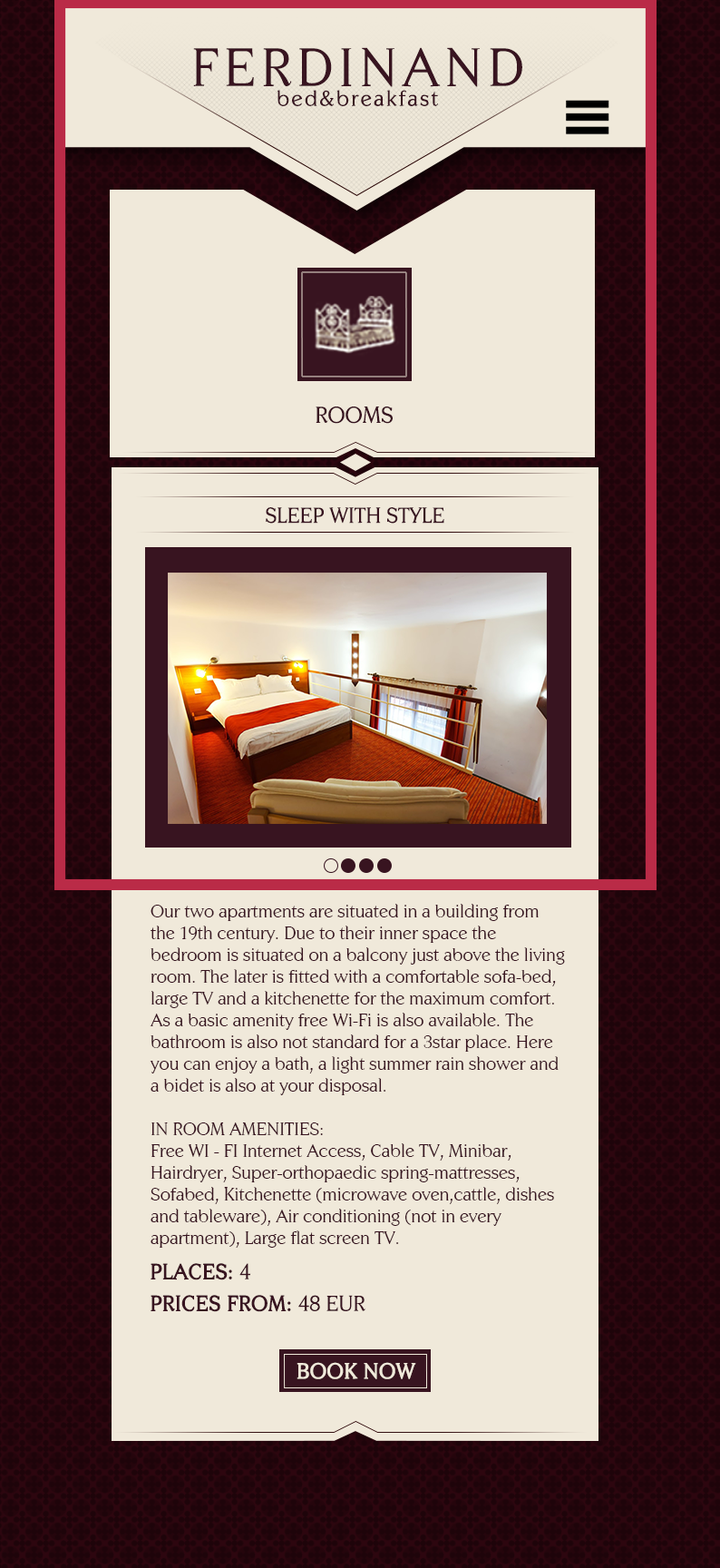
<style>
.page{position:relative;width:720px;height:1568px;background:#f0e9da}
.page>*{position:absolute;margin:0}
.t1{font:54.4px "CentabelBook";letter-spacing:0.1em;color:#381420;text-transform:uppercase}
.t2{font:21.8px "CentabelBook";letter-spacing:0.1em;color:#381420}
.t3{font:23px "CentabelBook";color:#381420;text-transform:uppercase}
.t4{font:21.8px "CentabelBook";color:#381420;text-transform:uppercase}
.t5{font:18.1px "CentabelBook";color:#381420}
.t6{font:21.8px "CentabelBook";color:#381420;text-transform:uppercase;font-weight:bold}
.t7{font:21.8px "CentabelBook";color:#f0e9da;text-transform:uppercase;font-weight:bold}
</style>
<div class="page">
<p class="t1" style="left:193px;top:47px;width:330px;height:40px">Ferdinand</p>
<p class="t2" style="left:277px;top:90px;width:161px;height:16px">bed&amp;breakfast</p>
<p class="t3" style="left:316px;top:407px;width:77px;height:17px">Rooms</p>
<p class="t4" style="left:266px;top:507px;width:179px;height:17px">Sleep with style</p>
<p class="t5" style="left:150px;top:904px;width:415px;height:344px">Our two apartments are situated in a building from the 19th century. Due to their inner space the bedroom is situated on a balcony just above the living room. The later is fitted with a comfortable sofa-bed, large TV and a kitchenette for the maximum comfort. As a basic amenity free Wi-Fi is also available. The bathroom is also not standard for a 3star place. Here you can enjoy a bath, a light summer rain shower and a bidet is also at your disposal.<br><br>IN ROOM AMENITIES:<br>Free WI - FI Internet Access, Cable TV, Minibar, Hairdryer, Super-orthopaedic spring-mattresses, Sofabed, Kitchenette (microwave oven,cattle, dishes and tableware), Air conditioning (not in every apartment), Large flat screen TV.</p>
<p class="t6" style="left:151px;top:1263px;width:100px;height:17px">Places: <span class="t4">4</span></p>
<p class="t6" style="left:151px;top:1295px;width:215px;height:17px">PRICES FROM: <span class="t4">48 EUR</span></p>
<p class="t7" style="left:297px;top:1362px;width:119px;height:17px">BOOK NOW</p>
</div>
